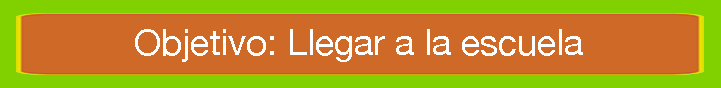
<style>
.page{position:relative;width:721px;height:88px;background:#cf6927}
.page>*{position:absolute;margin:0}
.t1{font:36px "HelveticaNeue";color:#ffffff}
</style>
<div class="page">
<p class="t1" style="left:135px;top:29px;width:448px;height:33px">Objetivo: Llegar a la escuela</p>
</div>
